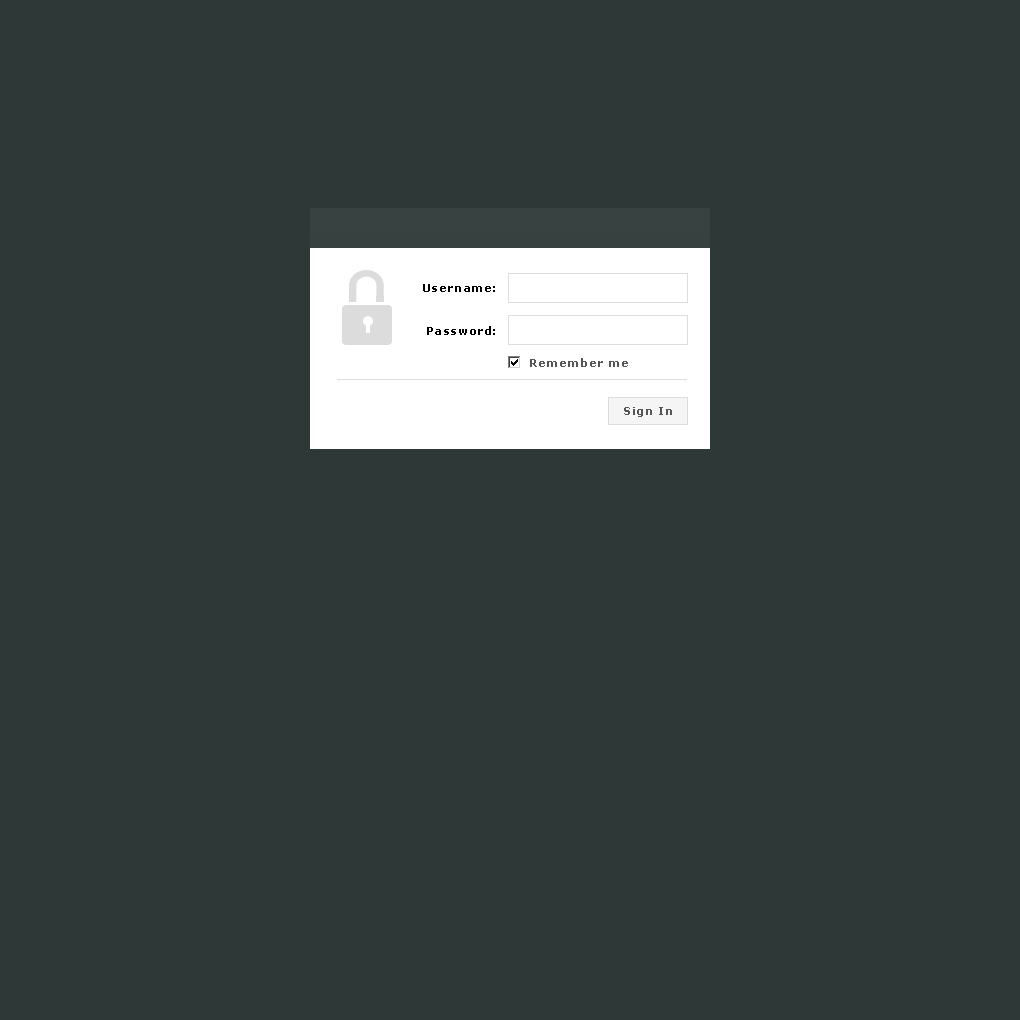
<style>
.page{position:relative;width:1020px;height:1020px;background:#2e3837}
.page>*{position:absolute;margin:0}
.t1{font:11px "Verdana-Bold";letter-spacing:0.05em;color:#000000}
.t2{font:11px "Verdana-Bold";letter-spacing:0.05em;color:#565656}
</style>
<div class="page">
<p class="t1" style="left:423px;top:284px;width:72px;height:8px">Username:</p>
<p class="t1" style="left:427px;top:326px;width:68px;height:9px">Password:</p>
<p class="t2" style="left:530px;top:358px;width:98px;height:9px">Remember me</p>
<p class="t2" style="left:624px;top:407px;width:48px;height:10px">Sign In</p>
</div>
